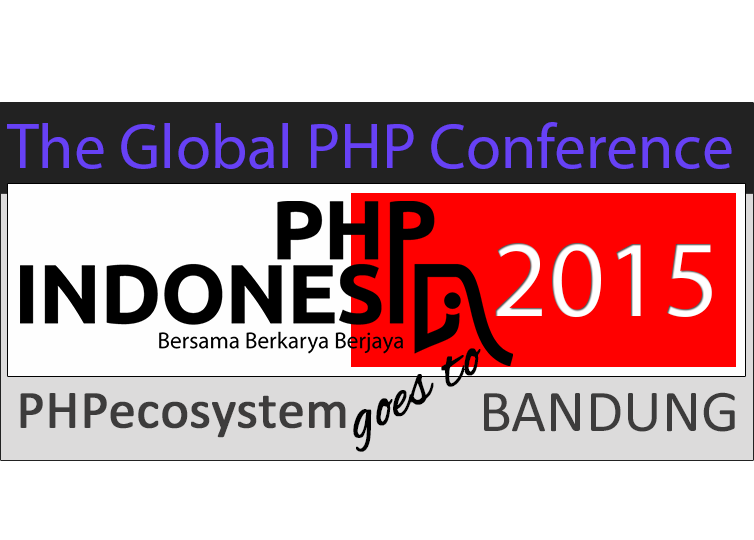
<style>
.page{position:relative;width:754px;height:540px;background:#ffffff}
.page>*{position:absolute;margin:0}
.t1{font:63.5px "MyriadPro-Regular";color:#6741f5}
.t2{font:110.4px "MyriadPro-Regular";color:#ffffff}
.t3{font:63.5px "AlexBrush-Regular";color:#000000;font-weight:bold;scale:1.04 1}
.t4{font:53.4px "Calibri";color:#3d3c3c;font-weight:bold}
.t5{font:59.7px "Calibri";color:#3d3c3c}
</style>
<div class="page">
<p class="t1" style="left:7px;top:122px;width:725px;height:47px">The Global PHP Conference</p>
<p class="t2" style="left:495px;top:242px;width:217px;height:76px">2015</p>
<p class="t3" style="left:353px;top:348px;width:128px;height:104px;rotate:-29deg">goes to</p>
<p class="t4" style="left:20px;top:393px;width:326px;height:45px">PHPecosystem</p>
<p class="t5" style="left:484px;top:392px;width:251px;height:40px">BANDUNG</p>
</div>
